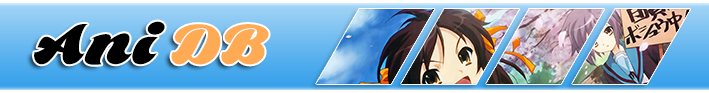
<style>
.page{position:relative;width:709px;height:93px}
.page>*{position:absolute;margin:0}
.t1{font:60px "BlackFoxPersonalUseOnly";color:#000000}
.t2{font:60px "BlackFoxPersonalUseOnly";color:#ffaa55}
</style>
<div class="page">
<p class="t1" style="left:34px;top:21px;width:235px;height:44px">Ani <span class="t2">DB</span></p>
</div>
